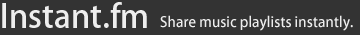
<style>
.page{position:relative;width:360px;height:35px;background:#333333}
.page>*{position:absolute;margin:0}
.t1{font:32px "AdobeFanHeitiStd-Bold";color:#eeeeee}
.t2{font:14px "AdobeFanHeitiStd-Bold";color:#eeeeee}
</style>
<div class="page">
<p class="t1" style="left:2px;top:2px;width:145px;height:26px">Instant.fm</p>
<p class="t2" style="left:160px;top:15px;width:193px;height:16px">Share music playlists instantly.</p>
</div>
